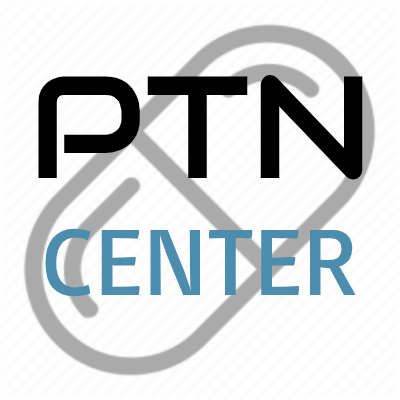
<style>
.page{position:relative;width:400px;height:400px;background:#fefefe}
.page>*{position:absolute;margin:0}
.t1{font:145px "Audiowide-Regular";color:#000000}
.t2{font:98px "Basic-Regular";color:#4c8dae}
</style>
<div class="page">
<p class="t1" style="left:38px;top:74px;width:325px;height:106px">PTN</p>
<p class="t2" style="left:45px;top:228px;width:311px;height:69px">CENTER</p>
</div>
